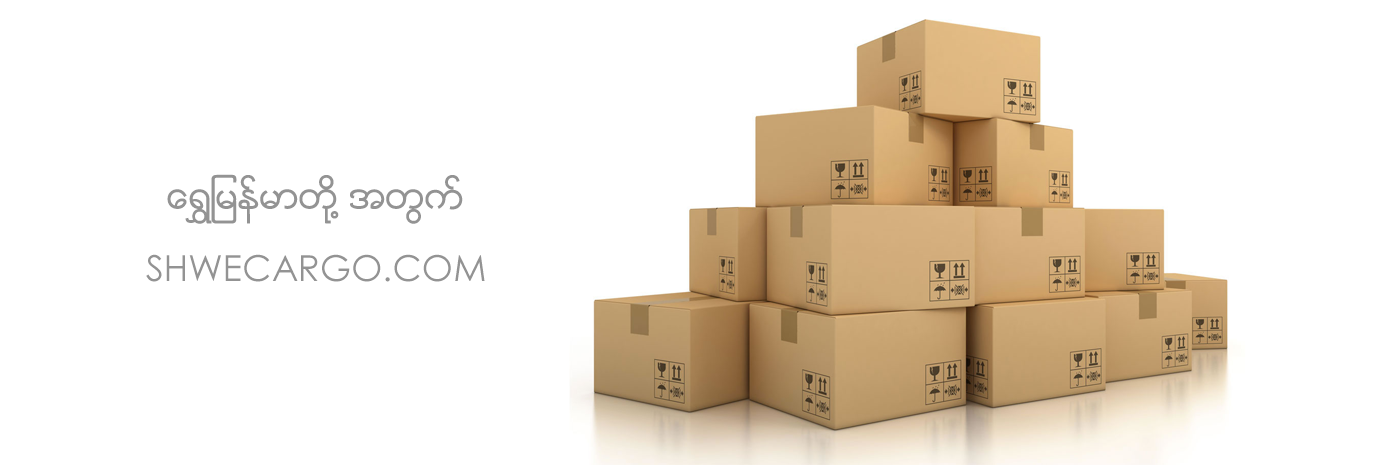
<style>
.page{position:relative;width:1400px;height:470px;background:#ffffff}
.page>*{position:absolute;margin:0}
.t1{font:36px/72px "Zawgyi-One";color:#939393}
.t2{font:36px/72px "CenturyGothic";color:#939393}
</style>
<div class="page">
<p class="t1" style="left:146px;top:174px;width:339px;height:108px;text-align:center">ေရႊျမန္မာတို႔ အတြက္<br><span class="t2">SHWECARGO.COM</span></p>
</div>
